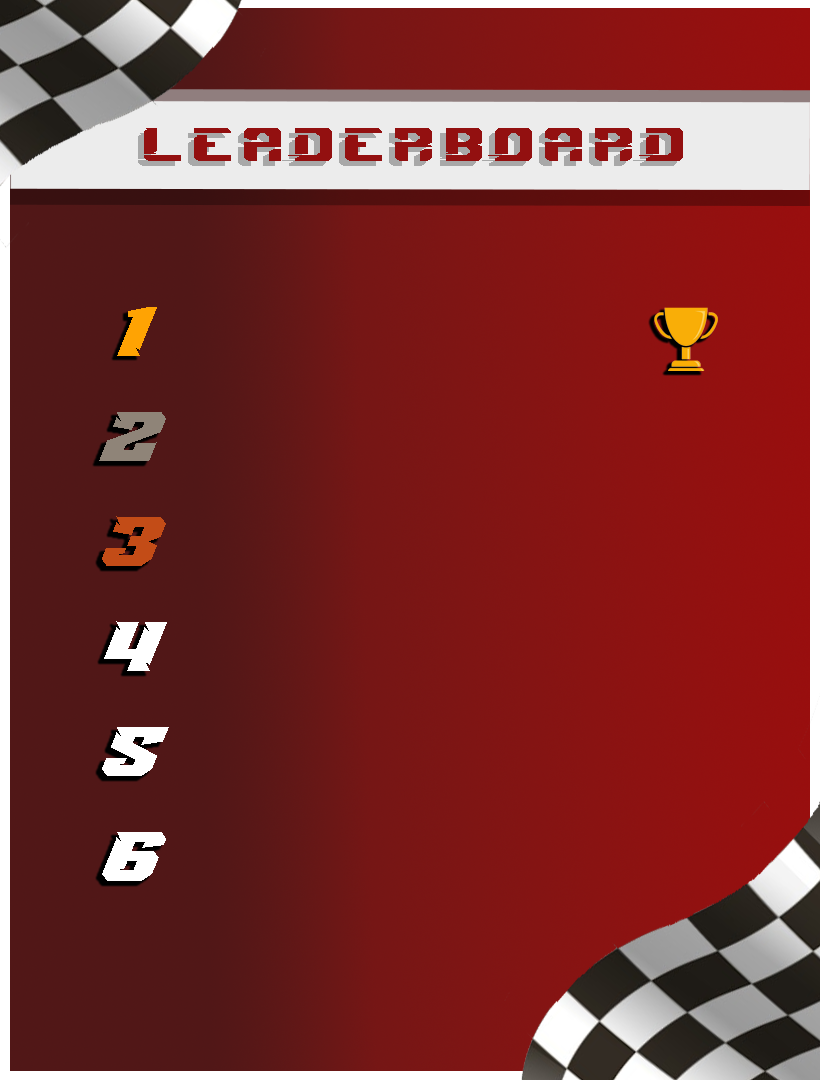
<style>
.page{position:relative;width:820px;height:1080px}
.page>*{position:absolute;margin:0}
.t1{font:68.6px "SprintRaceDemoRegular";color:#931010;scale:1.11 1}
.t2{font:68.6px "RushDriver-Italic";color:#ffa303;scale:1.11 1}
.t3{font:68.6px "RushDriver-Italic";color:#8f8478;scale:1.11 1}
.t4{font:68.6px "RushDriver-Italic";color:#c34c17;scale:1.11 1}
.t5{font:68.6px "RushDriver-Italic";color:#ffffff;scale:1.11 1}
</style>
<div class="page">
<p class="t1" style="left:144px;top:128px;width:539px;height:33px">leaderboard</p>
<p class="t2" style="left:117px;top:307px;width:40px;height:49px">1</p>
<p class="t3" style="left:99px;top:412px;width:67px;height:49px">2</p>
<p class="t4" style="left:102px;top:516px;width:64px;height:50px">3</p>
<p class="t5" style="left:104px;top:621px;width:63px;height:50px">4</p>
<p class="t5" style="left:102px;top:727px;width:67px;height:49px">5</p>
<p class="t5" style="left:102px;top:832px;width:64px;height:49px">6</p>
</div>
